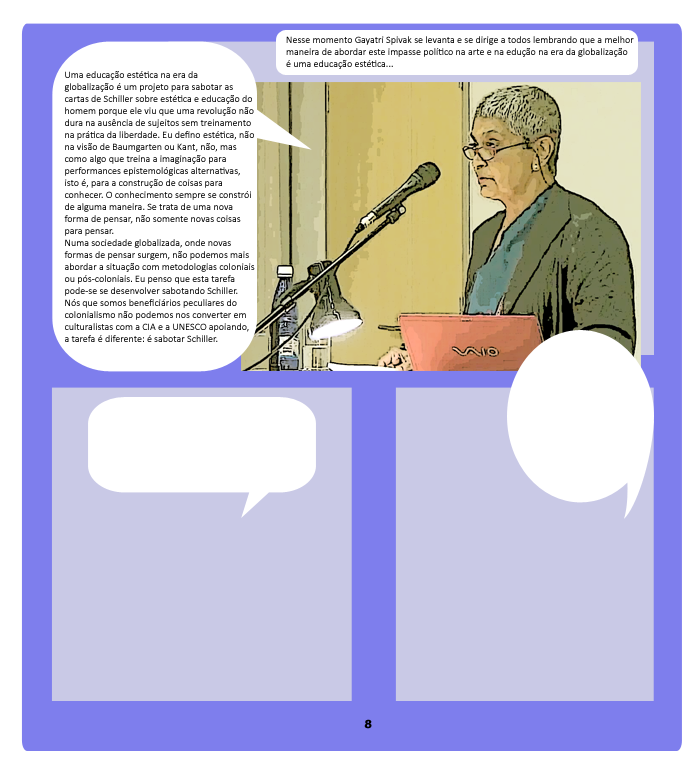
<style>
.page{position:relative;width:700px;height:768px;background:#ffffff}
.page>*{position:absolute;margin:0}
.t1{font:10px "Calibri";color:#000000}
.t2{font:12px "ErasITC-Bold";color:#000000}
</style>
<div class="page">
<p class="t1" style="left:286px;top:36px;width:348px;height:33px">Nesse momento Gayatri Spivak se levanta e se dirige a todos lembrando que a melhor <br>maneira de abordar este impasse político na arte e na edução na era da globalização<br>é uma educação estética...</p>
<p class="t1" style="left:64px;top:71px;width:191px;height:271px">Uma educação estética na era da <br>globalização é um projeto para sabotar as <br>cartas de Schiller sobre estética e educação do <br>homem porque ele viu que uma revolução não<br>dura na ausência de sujeitos sem treinamento <br>na prática da liberdade. Eu defino estética, não <br>na visão de Baumgarten ou Kant, não, mas <br>como algo que treina a imaginação para <br>performances epistemológicas alternativas, <br>isto é, para a construção de coisas para <br>conhecer. O conhecimento sempre se constrói <br>de alguma maneira. Se trata de uma nova <br>forma de pensar, não somente novas coisas <br>para pensar.<br>Numa sociedade globalizada, onde novas <br>formas de pensar surgem, não podemos mais <br>abordar a situação com metodologias coloniais <br>ou pós-coloniais. Eu penso que esta tarefa <br>pode-se se desenvolver sabotando Schiller. <br>Nós que somos beneficiários peculiares do <br>colonialismo não podemos nos converter em <br>culturalistas com a CIA e a UNESCO apoiando, <br>a tarefa é diferente: é sabotar Schiller.</p>
<p class="t2" style="left:364px;top:719px;width:8px;height:10px">8</p>
</div>
